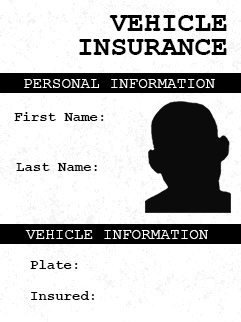
<style>
.page{position:relative;width:241px;height:322px;background:#ffffff}
.page>*{position:absolute;margin:0}
.t1{font:28px/24px "CourierNewPS-BoldMT";color:#000000}
.t2{font:16px "CourierNewPSMT";color:#ffffff}
.t3{font:14px "CourierNewPS-BoldMT";color:#000000}
</style>
<div class="page">
<p class="t1" style="left:79px;top:15px;width:148px;height:40px;text-align:right">VEHICLE<br>INSURANCE</p>
<p class="t2" style="left:24px;top:79px;width:191px;height:9px">PERSONAL INFORMATION</p>
<p class="t3" style="left:14px;top:112px;width:90px;height:9px">First Name:</p>
<p class="t3" style="left:16px;top:163px;width:81px;height:8px">Last Name:</p>
<p class="t2" style="left:25px;top:230px;width:183px;height:9px">VEHICLE INFORMATION</p>
<p class="t3" style="left:30px;top:260px;width:48px;height:9px">Plate:</p>
<p class="t3" style="left:31px;top:291px;width:63px;height:9px">Insured:</p>
</div>
